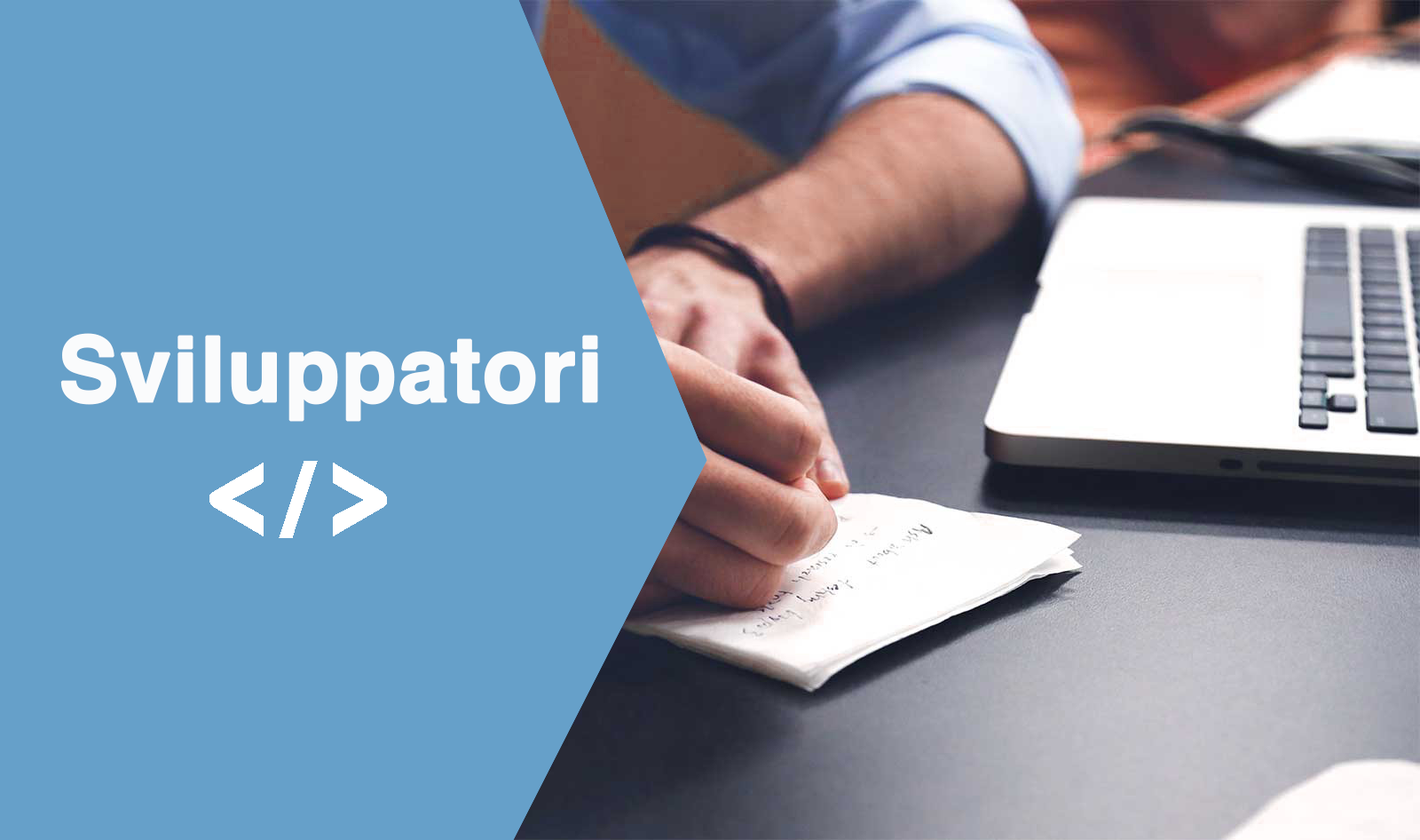
<style>
.page{position:relative;width:1420px;height:840px;background:#66a0c9}
.page>*{position:absolute;margin:0}
.t1{font:89.5px "Helvetica-Bold";color:#fafbfc;font-weight:bold}
.t2{font:89.5px "Helvetica-Bold";color:#66a0c9;font-weight:bold}
</style>
<div class="page">
<p class="t1" style="left:0px;top:333px;width:598px;height:89px"><span class="t2">S</span>Sviluppatori</p>
</div>
